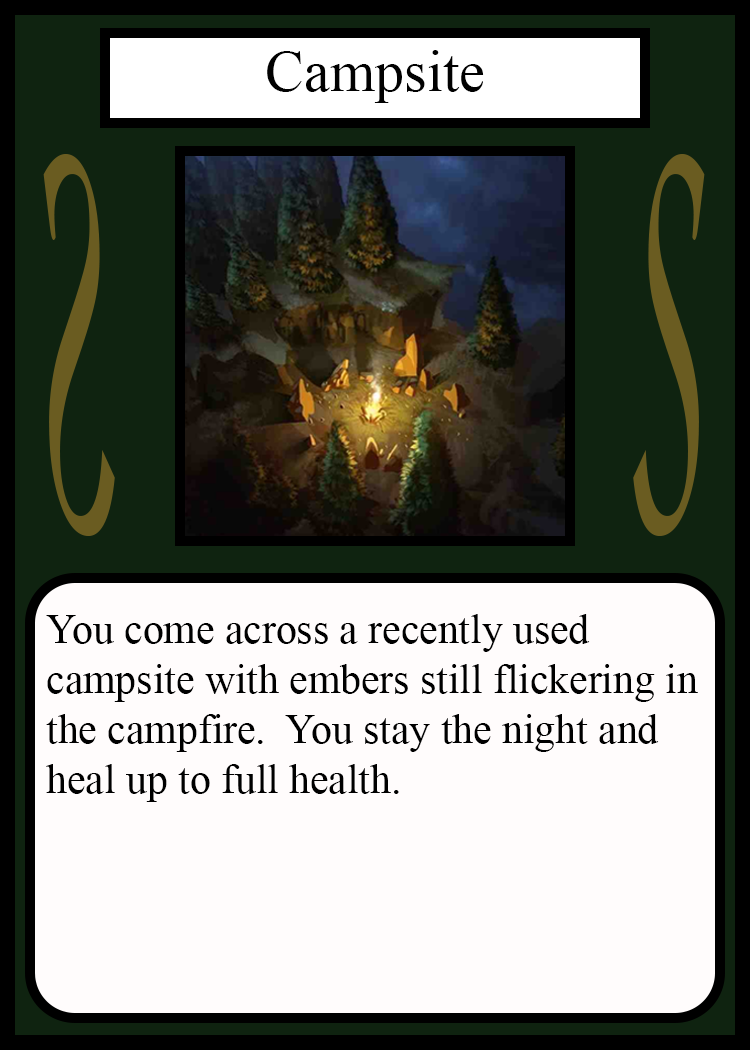
<style>
.page{position:relative;width:750px;height:1050px;background:#fffcfc}
.page>*{position:absolute;margin:0}
.t1{font:58.3px "TimesNewRomanPSMT";color:#010101}
.t2{font:548.5px "Apple-Chancery";color:#6a5c21;scale:0.27 1}
.t3{font:548.2px "Apple-Chancery";color:#6a5c21;scale:0.27 1}
.t4{font:41.7px "TimesNewRomanPSMT";color:#000000}
</style>
<div class="page">
<p class="t1" style="left:267px;top:50px;width:217px;height:53px">Campsite</p>
<p class="t2" style="left:43px;top:154px;width:72px;height:382px;rotate:180deg">S</p>
<p class="t3" style="left:633px;top:154px;width:72px;height:382px">S</p>
<p class="t4" style="left:46px;top:614px;width:652px;height:188px">You come across a recently used <br>campsite with embers still flickering in<br>the campfire.  You stay the night and<br>heal up to full health.</p>
</div>
